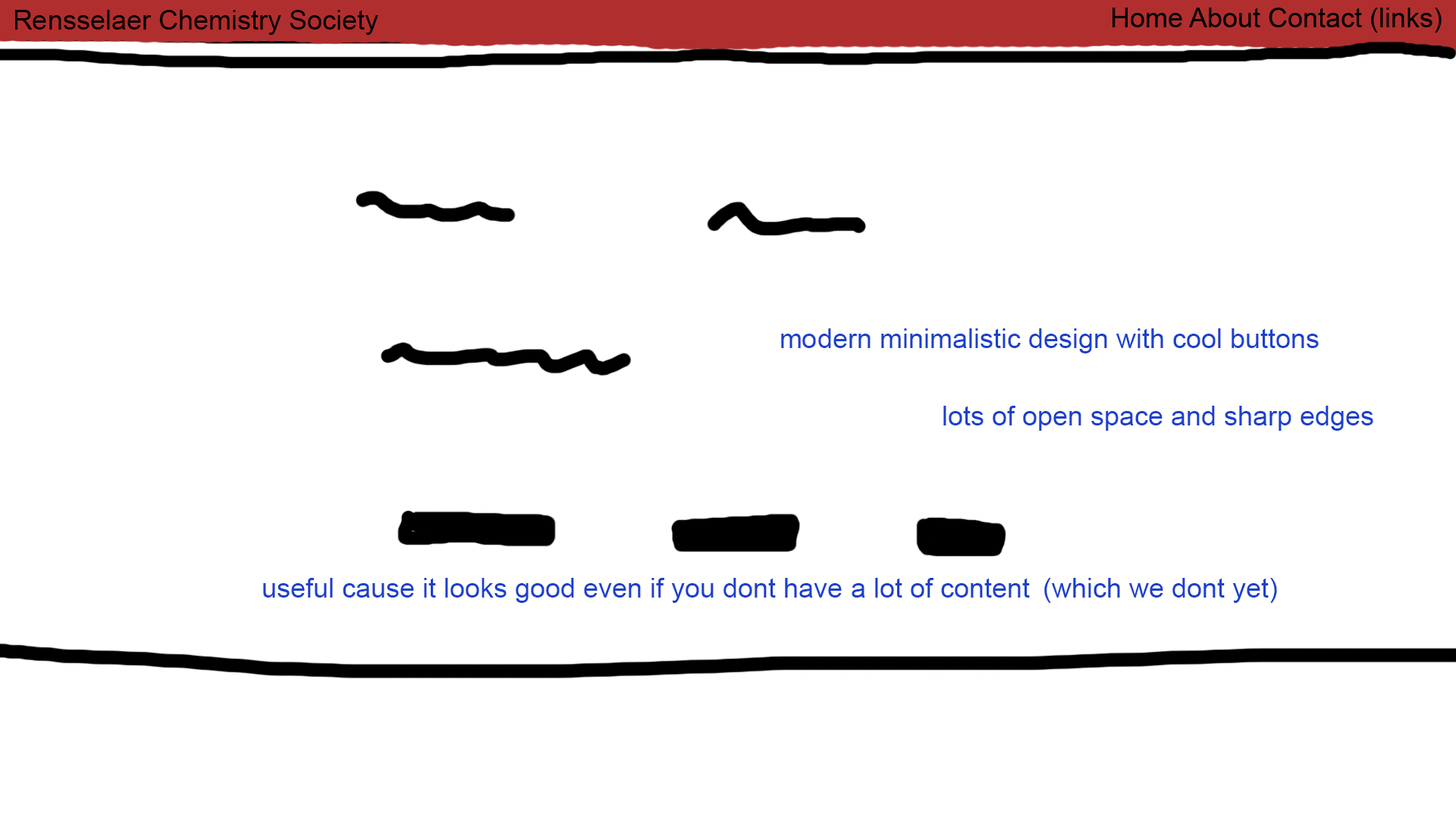
<style>
.page{position:relative;width:1456px;height:819px;background:#ffffff}
.page>*{position:absolute;margin:0}
.t1{font:27.3px "ArialMT";color:#000000}
.t2{font:27.3px "ArialMT";color:#1b40cd}
</style>
<div class="page">
<p class="t1" style="left:15px;top:10px;width:363px;height:25px">Rensselaer Chemistry Society</p>
<p class="t2" style="left:781px;top:328px;width:538px;height:25px">modern minimalistic design with cool buttons</p>
<p class="t2" style="left:943px;top:406px;width:430px;height:25px">lots of open space and sharp edges</p>
<p class="t2" style="left:263px;top:578px;width:767px;height:25px">useful cause it looks good even if you dont have a lot of content</p>
<p class="t2" style="left:1044px;top:578px;width:233px;height:25px">(which we dont yet)</p>
</div>
